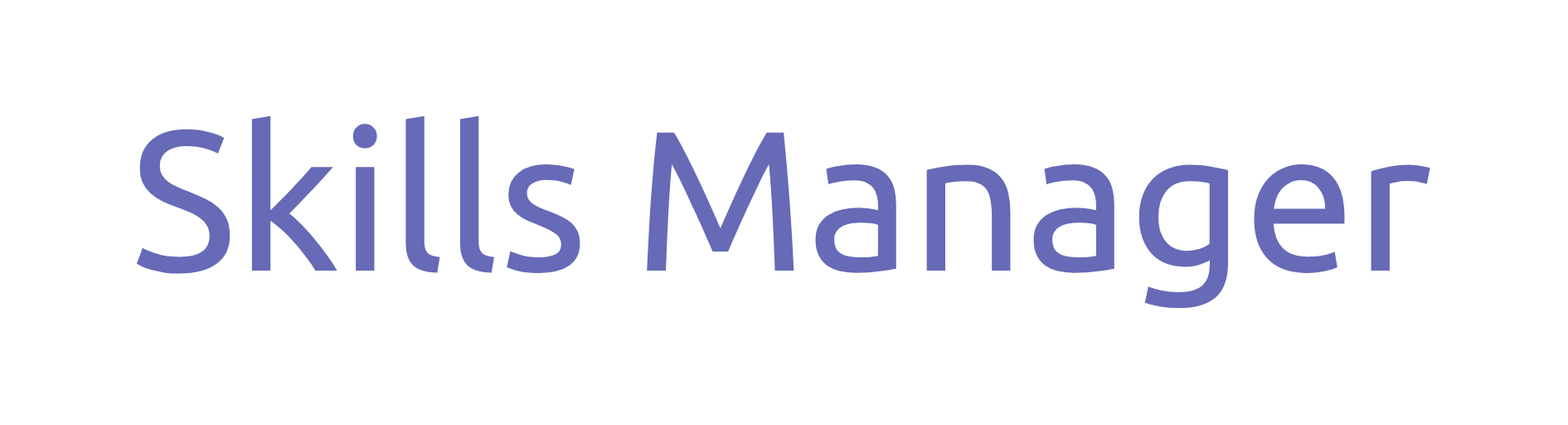
<style>
.page{position:relative;width:1568px;height:425px;background:#ffffff}
.page>*{position:absolute;margin:0}
.t1{font:199px "Ubuntu-Regular";color:#666ab7}
</style>
<div class="page">
<p class="t1" style="left:136px;top:115px;width:1294px;height:193px">Skills Manager</p>
</div>
